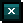
<style>
.page{position:relative;width:23px;height:23px;background:#031212}
.page>*{position:absolute;margin:0}
.t1{font:12px "Terminal";color:#ffffff}
</style>
<div class="page">
<p class="t1" style="left:8px;top:8px;width:7px;height:6px">x</p>
</div>
